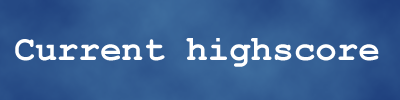
<style>
.page{position:relative;width:400px;height:100px}
.page>*{position:absolute;margin:0}
.t1{font:35.9px "CourierNewPS-BoldMT";color:#ffffff}
</style>
<div class="page">
<p class="t1" style="left:15px;top:38px;width:364px;height:29px">Current highscore</p>
</div>
